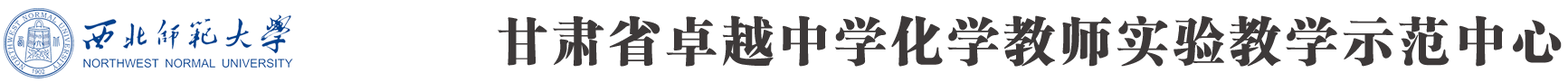
<style>
.page{position:relative;width:1568px;height:82px;background:#ffffff}
.page>*{position:absolute;margin:0}
.t1{font:51.3px "FZCSJW--GB1-0";letter-spacing:0.1em;color:#3d3939}
</style>
<div class="page">
<p class="t1" style="left:498px;top:15px;width:1064px;height:52px">甘肃省卓越中学化学教师实验教学示范中心</p>
</div>
